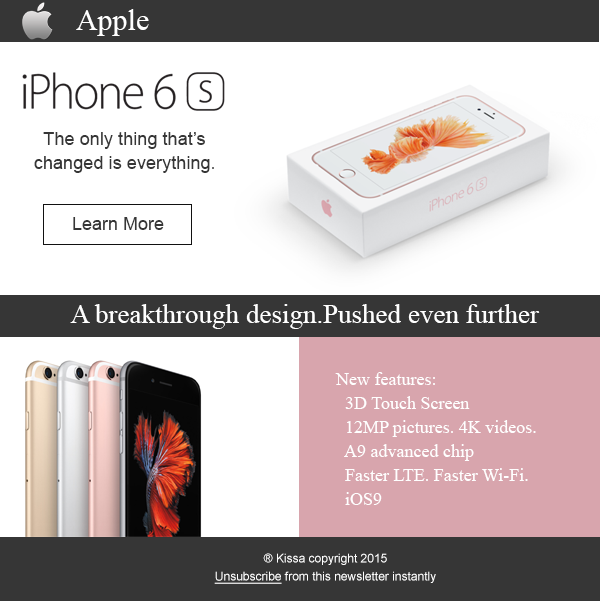
<style>
.page{position:relative;width:600px;height:601px;background:#ffffff}
.page>*{position:absolute;margin:0}
.t1{font:30px "TimesNewRomanPSMT";color:#ffffff}
.t2{font:18.1px/24.1px "ArialMT";color:#363636}
.t3{font:18.1px/24.1px "TimesNewRomanPSMT";color:#363636}
.t4{font:18px "ArialMT";color:#363636}
.t5{font:27px "TimesNewRomanPSMT";color:#ffffff}
.t6{font:18px/24px "TimesNewRomanPSMT";color:#ffffff}
.t7{font:12px/18px "ArialMT";color:#ffffff}
.t8{font:12px/18px "ArialMT";color:#ffffff;text-decoration:underline}
</style>
<div class="page">
<p class="t1" style="left:76px;top:9px;width:73px;height:27px">Apple</p>
<p class="t2" style="left:34px;top:132px;width:180px;height:41px;text-align:center">The only thing that’s changed is everything<span class="t3">.</span></p>
<p class="t4" style="left:73px;top:217px;width:91px;height:13px">Learn More</p>
<p class="t5" style="left:70px;top:304px;width:470px;height:25px">A breakthrough design.Pushed even further</p>
<p class="t6" style="left:335px;top:372px;width:201px;height:133px">New features:<br>  3D Touch Screen<br>  12MP pictures. 4K videos. <br>  A9 advanced chip <br>  Faster LTE. Faster Wi‑Fi.<br>  iOS9</p>
<p class="t7" style="left:214px;top:553px;width:222px;height:31px;text-align:center">® Kissa copyright 2015<br><span class="t8">Unsubscribe</span> from this newsletter instantly</p>
</div>
